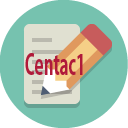
<style>
.page{position:relative;width:128px;height:128px;background:#76c2af}
.page>*{position:absolute;margin:0}
.t1{font:27.9px "AdobeGothicStd-Bold";color:#b01a3a;scale:0.58 1}
</style>
<div class="page">
<p class="t1" style="left:25px;top:53px;width:58px;height:22px">Centac1</p>
</div>
